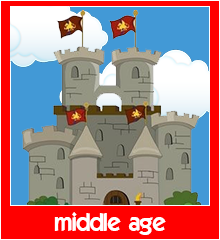
<style>
.page{position:relative;width:220px;height:240px;background:#ff0000}
.page>*{position:absolute;margin:0}
.t1{font:24px "ELEGANCE";color:#ffffff}
</style>
<div class="page">
<p class="t1" style="left:54px;top:212px;width:112px;height:23px">middle age</p>
</div>
